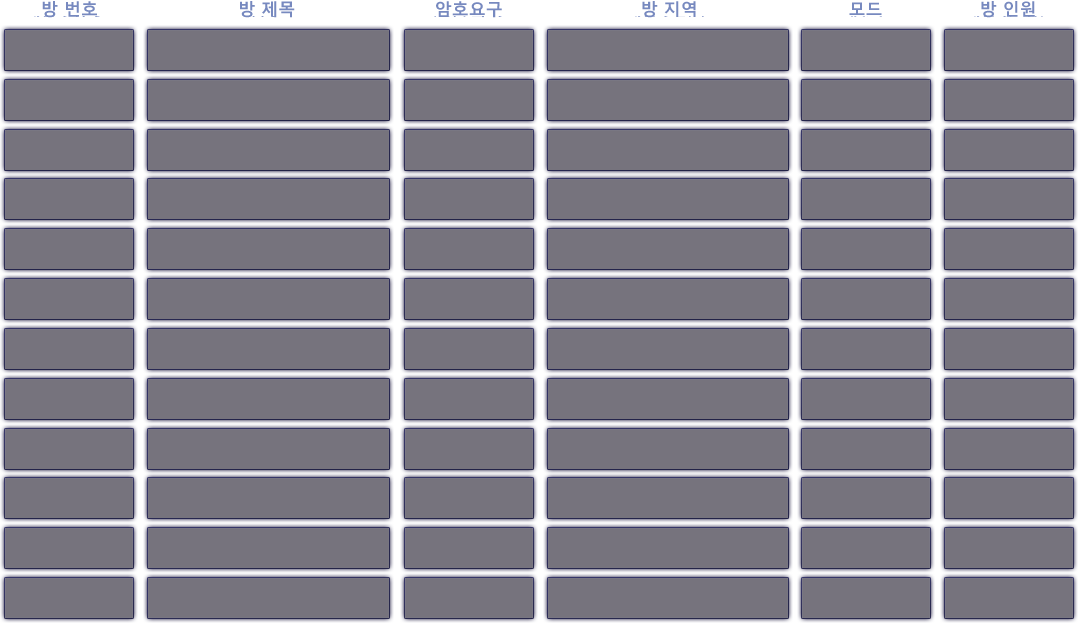
<style>
.page{position:relative;width:1078px;height:623px;background:#76737d}
.page>*{position:absolute;margin:0}
.t1{font:17px "MalgunGothicBold";color:#7789bf}
</style>
<div class="page">
<p class="t1" style="left:42px;top:1px;width:55px;height:17px">방 번호</p>
<p class="t1" style="left:240px;top:1px;width:55px;height:17px">방 제목</p>
<p class="t1" style="left:436px;top:1px;width:66px;height:17px">암호요구</p>
<p class="t1" style="left:642px;top:1px;width:54px;height:17px">방 지역</p>
<p class="t1" style="left:849px;top:2px;width:33px;height:13px">모드</p>
<p class="t1" style="left:981px;top:1px;width:54px;height:17px">방 인원</p>
</div>
